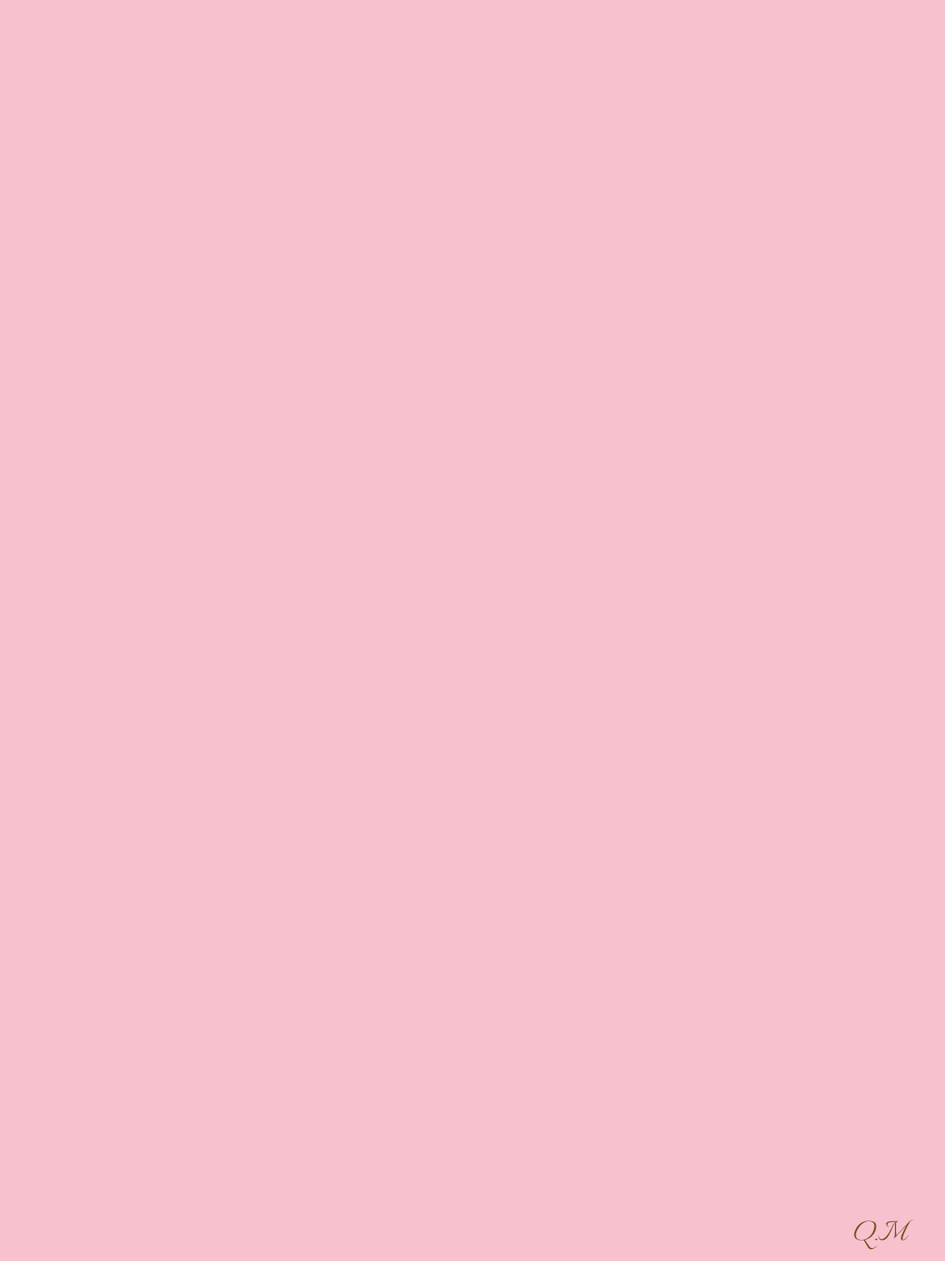
<style>
.page{position:relative;width:945px;height:1261px;background:#f7c1ce}
.page>*{position:absolute;margin:0}
.t1{font:34.6px "Italianno-Regular";letter-spacing:-0.025em;color:#854b0e}
</style>
<div class="page">
<p class="t1" style="left:854px;top:1220px;width:60px;height:30px">Q.M</p>
</div>
